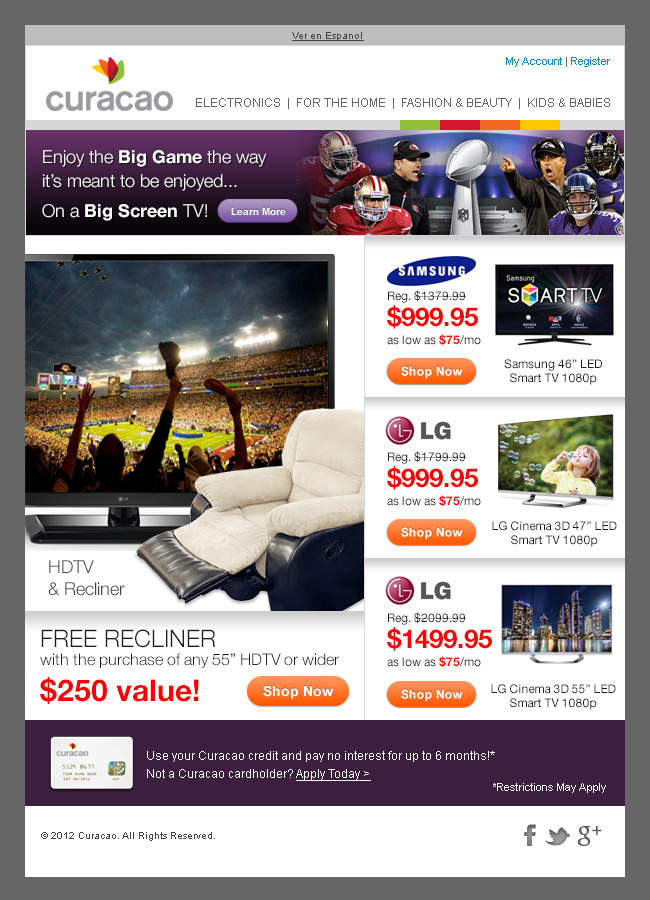
<style>
.page{position:relative;width:650px;height:900px;background:#ffffff}
.page>*{position:absolute;margin:0}
.t1{font:10px "ArialMT";color:#444444;text-decoration:underline}
.t2{font:11px "ArialMT";color:#008ecf}
.t3{font:11px "ArialMT";color:#666666}
.t4{font:12px "ArialMT";color:#666666}
.t5{font:18px/24px "HelveticaNeue-Light";color:#ffffff}
.t6{font:18px/24px "HelveticaNeue-Bold";color:#ffffff}
.t7{font:18px/30px "HelveticaNeue-Light";color:#ffffff}
.t8{font:18px/30px "HelveticaNeue-Bold";color:#ffffff}
.t9{font:10px "Arial-BoldMT";color:#ffffff}
.t10{font:12px/18px "HelveticaNeue-Roman";color:#1e1e1e}
.t11{font:26px/26px "HelveticaNeue-Bold";color:#ff0000}
.t12{font:12px/18px "HelveticaNeue-Bold";color:#ff0000}
.t13{font:12px/14px "HelveticaNeue-Roman";color:#1e1e1e}
.t14{font:18px/22px "HelveticaNeue-Light";color:#444444}
.t15{font:16px/18px "HelveticaNeue-Light";color:#1e1e1e}
.t16{font:24px/18px "HelveticaNeue-Light";color:#1e1e1e}
.t17{font:30px/36px "HelveticaNeue-Bold";color:#ff0000}
.t18{font:12px/18px "ArialMT";color:#ffffff}
.t19{font:12px/18px "ArialMT";color:#ffffff;text-decoration:underline}
.t20{font:11px "ArialMT";color:#ffffff}
.t21{font:10px "ArialMT";color:#444444}
</style>
<div class="page">
<p class="t1" style="left:292px;top:32px;width:72px;height:9px">Ver en Espanol</p>
<p class="t2" style="left:506px;top:57px;width:104px;height:10px">My Account<span class="t3"> | </span>Register</p>
<p class="t4" style="left:196px;top:98px;width:414px;height:11px">ELECTRONICS  |  FOR THE HOME  |  FASHION &amp; BEAUTY  |  KIDS &amp; BABIES</p>
<p class="t5" style="left:42px;top:150px;width:225px;height:71px">Enjoy the <span class="t6">Big Game</span> the way it’s meant to be enjoyed... <br><span class="t7">On a </span><span class="t8">Big Screen</span><span class="t7"> TV!</span></p>
<p class="t9" style="left:231px;top:207px;width:55px;height:8px">Learn More</p>
<p class="t10" style="left:387px;top:290px;width:94px;height:56px">Reg. $1379.99<br><span class="t11">$999.95<br></span>as low as <span class="t12">$75</span>/mo</p>
<p class="t13" style="left:504px;top:359px;width:98px;height:26px;text-align:center">Samsung 46” LED<br>Smart TV 1080p</p>
<p class="t10" style="left:387px;top:451px;width:94px;height:56px">Reg. $1799.99<br><span class="t11">$999.95<br></span>as low as <span class="t12">$75</span>/mo</p>
<p class="t13" style="left:492px;top:521px;width:125px;height:26px;text-align:center">LG Cinema 3D 47” LED<br>Smart TV 1080p</p>
<p class="t14" style="left:48px;top:560px;width:77px;height:36px">HDTV<br>&amp; Recliner</p>
<p class="t10" style="left:387px;top:612px;width:105px;height:56px">Reg. $2099.99<br><span class="t11">$1499.95<br></span>as low as <span class="t12">$75</span>/mo</p>
<p class="t15" style="left:40px;top:629px;width:299px;height:75px"><span class="t16">FREE RECLINER<br></span>with the purchase of any 55” HDTV or wider<br><span class="t17">$250 value!</span></p>
<p class="t13" style="left:491px;top:684px;width:125px;height:26px;text-align:center">LG Cinema 3D 55” LED<br>Smart TV 1080p</p>
<p class="t18" style="left:147px;top:751px;width:348px;height:30px">Use your Curacao credit and pay no interest for up to 6 months!*<br>Not a Curacao cardholder? <span class="t19">Apply Today &gt;</span></p>
<p class="t20" style="left:493px;top:783px;width:113px;height:10px">*Restrictions May Apply</p>
<p class="t21" style="left:41px;top:832px;width:174px;height:9px">© 2012 Curacao. All Rights Reserved.</p>
</div>
